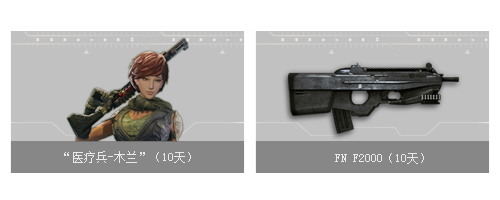
<style>
.page{position:relative;width:500px;height:200px;background:#ffffff}
.page>*{position:absolute;margin:0}
.t1{font:12px "SimSun";color:#e9e9e9}
</style>
<div class="page">
<p class="t1" style="left:64px;top:151px;width:127px;height:12px">“医疗兵-木兰”（10天）</p>
<p class="t1" style="left:335px;top:153px;width:89px;height:11px">FN F2000（10天）</p>
</div>
